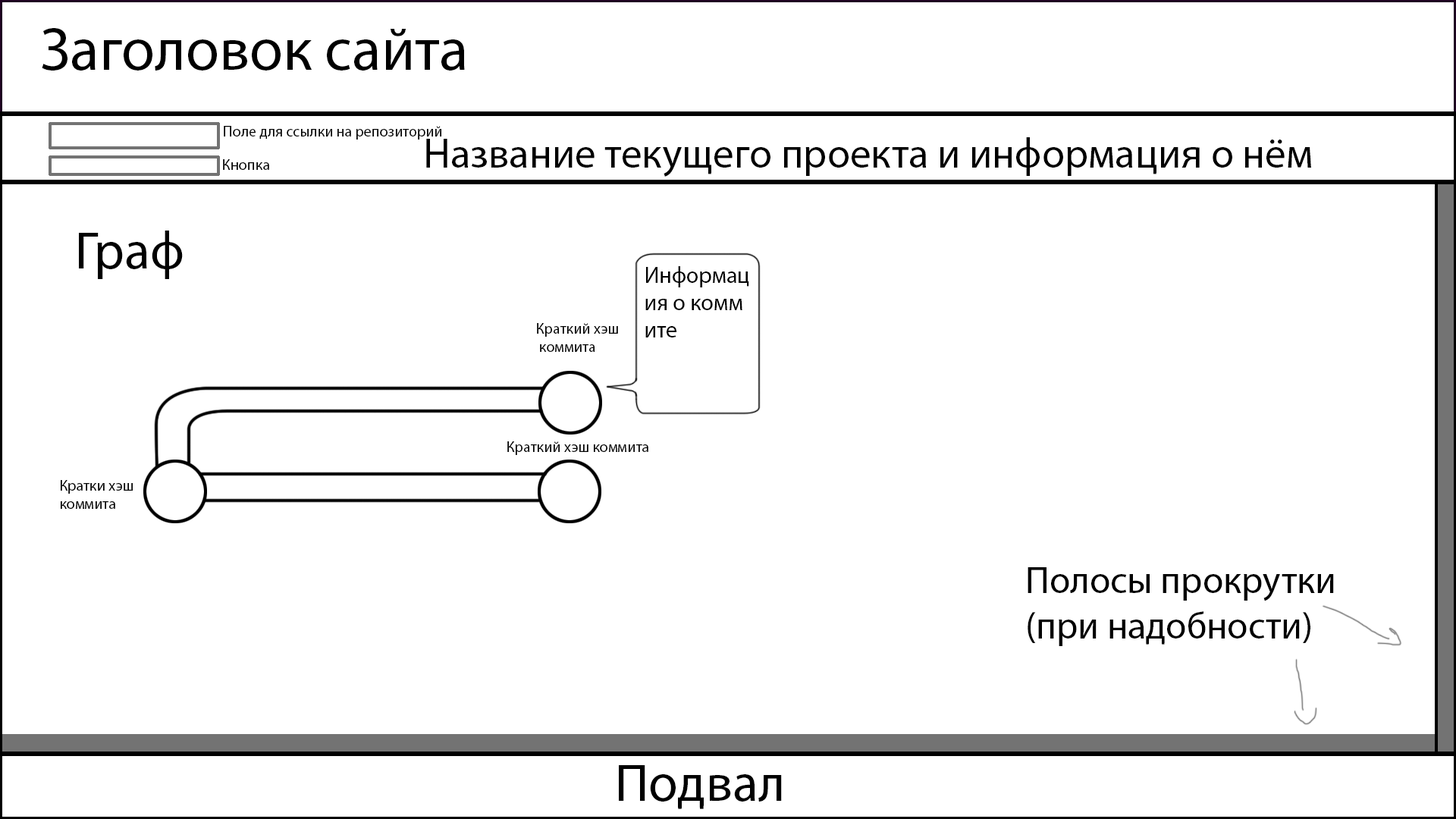
<style>
.page{position:relative;width:1456px;height:819px;background:#ffffff}
.page>*{position:absolute;margin:0}
.t1{font:60.7px "MyriadPro-Regular";color:#000000}
.t2{font:15.2px "MyriadPro-Regular";color:#000000}
.t3{font:41.7px "MyriadPro-Regular";color:#000000}
.t4{font:53.1px "MyriadPro-Regular";color:#000000}
.t5{font:22.7px "MyriadPro-Regular";color:#000000}
.t6{font:37.9px "MyriadPro-Regular";color:#000000}
</style>
<div class="page">
<p class="t1" style="left:42px;top:28px;width:423px;height:43px">Заголовок сайта</p>
<p class="t2" style="left:224px;top:126px;width:217px;height:14px">Поле для ссылки на репозиторий</p>
<p class="t3" style="left:426px;top:137px;width:885px;height:40px">Название текущего проекта и информация о нём</p>
<p class="t2" style="left:223px;top:159px;width:46px;height:11px">Кнопка</p>
<p class="t4" style="left:79px;top:231px;width:104px;height:48px">Граф</p>
<p class="t5" style="left:645px;top:266px;width:104px;height:71px">Информац<br>ия о комм<br>ите</p>
<p class="t2" style="left:537px;top:323px;width:81px;height:29px">Краткий хэш<br> коммита</p>
<p class="t2" style="left:507px;top:441px;width:141px;height:14px">Краткий хэш коммита</p>
<p class="t2" style="left:61px;top:480px;width:72px;height:29px">Кратки хэш<br>коммита</p>
<p class="t6" style="left:1028px;top:567px;width:306px;height:79px">Полосы прокрутки<br>(при надобности)</p>
<p class="t4" style="left:619px;top:765px;width:163px;height:44px">Подвал</p>
</div>
